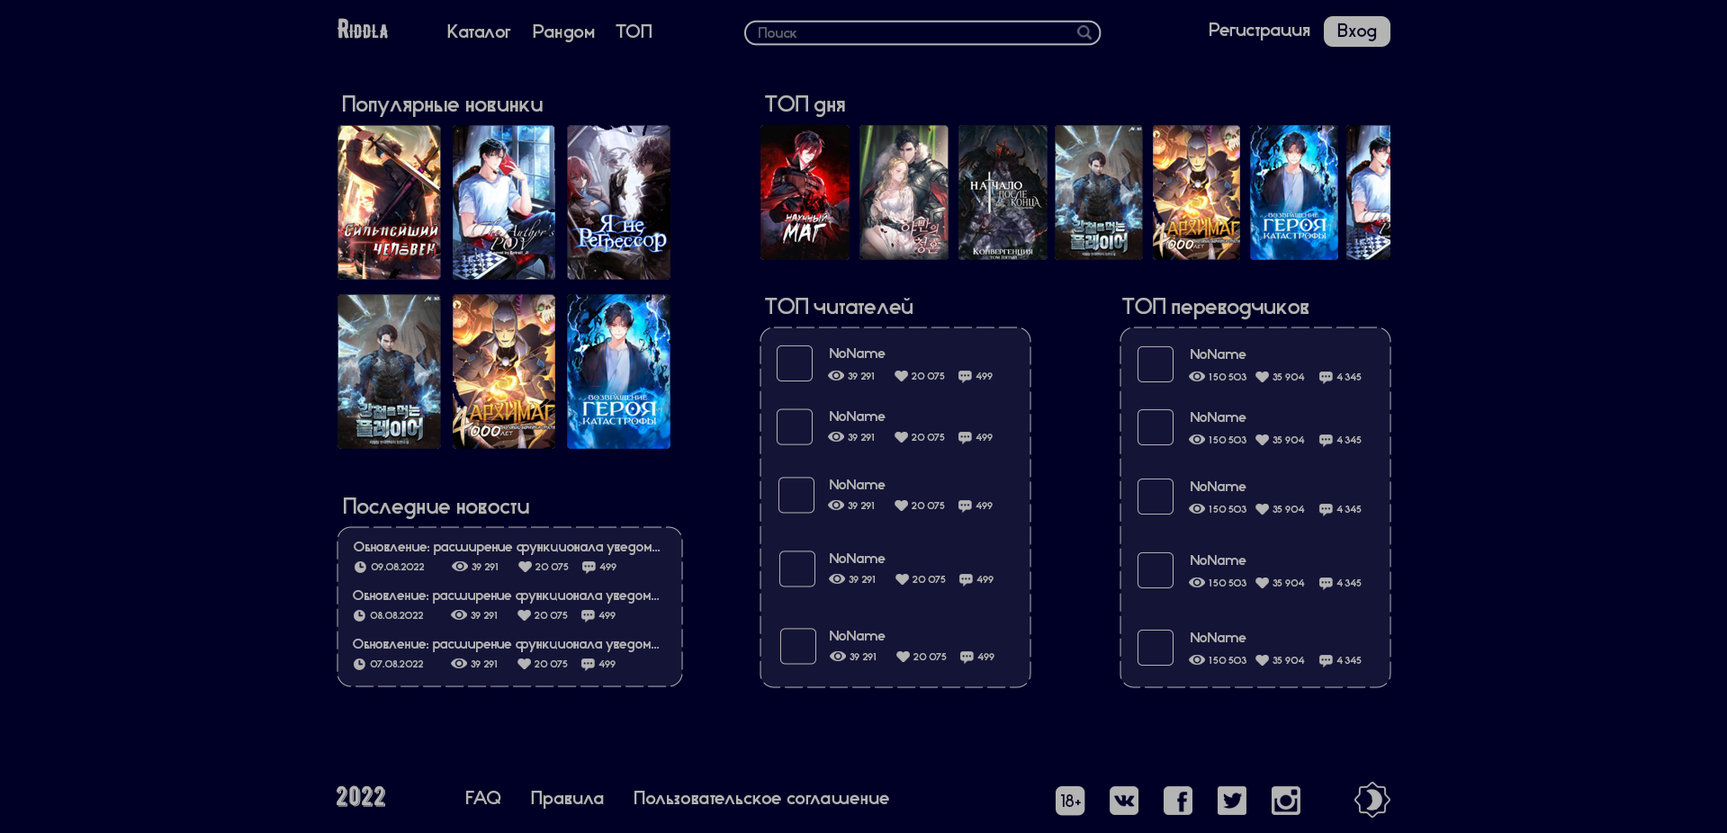
<style>
.page{position:relative;width:1727px;height:833px;background:#000026}
.page>*{position:absolute;margin:0}
.t1{font:27px "BERNIERDistressed-Regular";color:#b4b4b4;font-variant:small-caps}
.t2{font:18px "Stark";color:#b4b4b4}
.t3{font:14px "Stark";color:#5f5f69}
.t4{font:18px "Stark";color:#000026}
.t5{font:21.6px "Stark";color:#b4b4b4}
.t6{font:13.5px "Stark";color:#b4b4b4}
.t7{font:9px "Stark";color:#b4b4b4}
.t8{font:27px "BERNIERShade-Regular";color:#b4b4b4}
.t9{font:16.2px "Stark";color:#000026}
</style>
<div class="page">
<p class="t1" style="left:338px;top:18px;width:50px;height:21px">Riddla</p>
<p class="t2" style="left:447px;top:24px;width:64px;height:15px">Каталог</p>
<p class="t2" style="left:533px;top:24px;width:62px;height:18px">Рандом</p>
<p class="t2" style="left:616px;top:24px;width:36px;height:14px">ТОП</p>
<p class="t3" style="left:759px;top:27px;width:38px;height:11px">Поиск</p>
<p class="t2" style="left:1210px;top:22px;width:100px;height:18px">Регистрация</p>
<p class="t4" style="left:1337px;top:22px;width:40px;height:19px">Вход</p>
<p class="t5" style="left:343px;top:95px;width:200px;height:22px">Популярные новинки</p>
<p class="t5" style="left:765px;top:95px;width:80px;height:22px">ТОП дня</p>
<p class="t5" style="left:765px;top:298px;width:148px;height:16px">ТОП читателей</p>
<p class="t5" style="left:1122px;top:298px;width:187px;height:22px">ТОП переводчиков</p>
<p class="t6" style="left:830px;top:348px;width:56px;height:10px">NoName</p>
<p class="t6" style="left:1191px;top:349px;width:55px;height:10px">NoName</p>
<p class="t7" style="left:848px;top:373px;width:26px;height:7px">39 291</p>
<p class="t7" style="left:912px;top:373px;width:33px;height:7px">20 075</p>
<p class="t7" style="left:976px;top:373px;width:17px;height:7px">499</p>
<p class="t7" style="left:1209px;top:374px;width:37px;height:7px">1 50 503</p>
<p class="t7" style="left:1273px;top:374px;width:32px;height:7px">35 904</p>
<p class="t7" style="left:1336px;top:374px;width:26px;height:7px">4 345</p>
<p class="t6" style="left:830px;top:411px;width:56px;height:10px">NoName</p>
<p class="t6" style="left:1191px;top:412px;width:55px;height:10px">NoName</p>
<p class="t7" style="left:848px;top:434px;width:26px;height:7px">39 291</p>
<p class="t7" style="left:912px;top:434px;width:33px;height:7px">20 075</p>
<p class="t7" style="left:976px;top:434px;width:17px;height:7px">499</p>
<p class="t7" style="left:1209px;top:436px;width:37px;height:8px">1 50 503</p>
<p class="t7" style="left:1273px;top:436px;width:32px;height:8px">35 904</p>
<p class="t7" style="left:1336px;top:436px;width:26px;height:8px">4 345</p>
<p class="t6" style="left:830px;top:480px;width:56px;height:10px">NoName</p>
<p class="t6" style="left:1191px;top:482px;width:55px;height:9px">NoName</p>
<p class="t5" style="left:344px;top:498px;width:185px;height:21px">Последние новости</p>
<p class="t7" style="left:848px;top:502px;width:26px;height:7px">39 291</p>
<p class="t7" style="left:912px;top:502px;width:33px;height:7px">20 075</p>
<p class="t7" style="left:976px;top:502px;width:17px;height:7px">499</p>
<p class="t7" style="left:1209px;top:506px;width:37px;height:7px">1 50 503</p>
<p class="t7" style="left:1273px;top:506px;width:32px;height:7px">35 904</p>
<p class="t7" style="left:1336px;top:506px;width:26px;height:7px">4 345</p>
<p class="t6" style="left:354px;top:542px;width:306px;height:13px">Обновление: расширение функционала уведом...</p>
<p class="t6" style="left:830px;top:554px;width:56px;height:9px">NoName</p>
<p class="t6" style="left:1191px;top:555px;width:55px;height:10px">NoName</p>
<p class="t7" style="left:371px;top:563px;width:53px;height:8px">09.08.2022</p>
<p class="t7" style="left:472px;top:563px;width:26px;height:8px">39 291</p>
<p class="t7" style="left:536px;top:563px;width:33px;height:8px">20 075</p>
<p class="t7" style="left:599px;top:563px;width:17px;height:8px">499</p>
<p class="t7" style="left:849px;top:576px;width:26px;height:7px">39 291</p>
<p class="t7" style="left:913px;top:576px;width:33px;height:7px">20 075</p>
<p class="t7" style="left:976px;top:576px;width:18px;height:7px">499</p>
<p class="t7" style="left:1209px;top:580px;width:37px;height:7px">1 50 503</p>
<p class="t7" style="left:1273px;top:580px;width:32px;height:7px">35 904</p>
<p class="t7" style="left:1336px;top:580px;width:26px;height:7px">4 345</p>
<p class="t6" style="left:353px;top:590px;width:306px;height:14px">Обновление: расширение функционала уведом...</p>
<p class="t7" style="left:370px;top:612px;width:53px;height:7px">08.08.2022</p>
<p class="t7" style="left:471px;top:612px;width:26px;height:7px">39 291</p>
<p class="t7" style="left:535px;top:612px;width:33px;height:7px">20 075</p>
<p class="t7" style="left:598px;top:612px;width:18px;height:7px">499</p>
<p class="t6" style="left:353px;top:639px;width:306px;height:13px">Обновление: расширение функционала уведом...</p>
<p class="t6" style="left:830px;top:631px;width:56px;height:10px">NoName</p>
<p class="t6" style="left:1191px;top:633px;width:55px;height:10px">NoName</p>
<p class="t7" style="left:850px;top:653px;width:26px;height:8px">39 291</p>
<p class="t7" style="left:914px;top:653px;width:33px;height:8px">20 075</p>
<p class="t7" style="left:977px;top:653px;width:17px;height:8px">499</p>
<p class="t7" style="left:370px;top:661px;width:53px;height:7px">07.08.2022</p>
<p class="t7" style="left:471px;top:661px;width:26px;height:7px">39 291</p>
<p class="t7" style="left:535px;top:661px;width:33px;height:7px">20 075</p>
<p class="t7" style="left:598px;top:661px;width:18px;height:7px">499</p>
<p class="t7" style="left:1209px;top:657px;width:37px;height:7px">1 50 503</p>
<p class="t7" style="left:1273px;top:657px;width:32px;height:7px">35 904</p>
<p class="t7" style="left:1336px;top:657px;width:26px;height:7px">4 345</p>
<p class="t8" style="left:337px;top:786px;width:48px;height:21px">2022</p>
<p class="t2" style="left:466px;top:791px;width:35px;height:14px">FAQ</p>
<p class="t2" style="left:531px;top:791px;width:73px;height:18px">Правила</p>
<p class="t2" style="left:634px;top:791px;width:255px;height:15px">Пользовательское соглашение</p>
<p class="t9" style="left:1061px;top:795px;width:20px;height:12px">18+</p>
</div>
